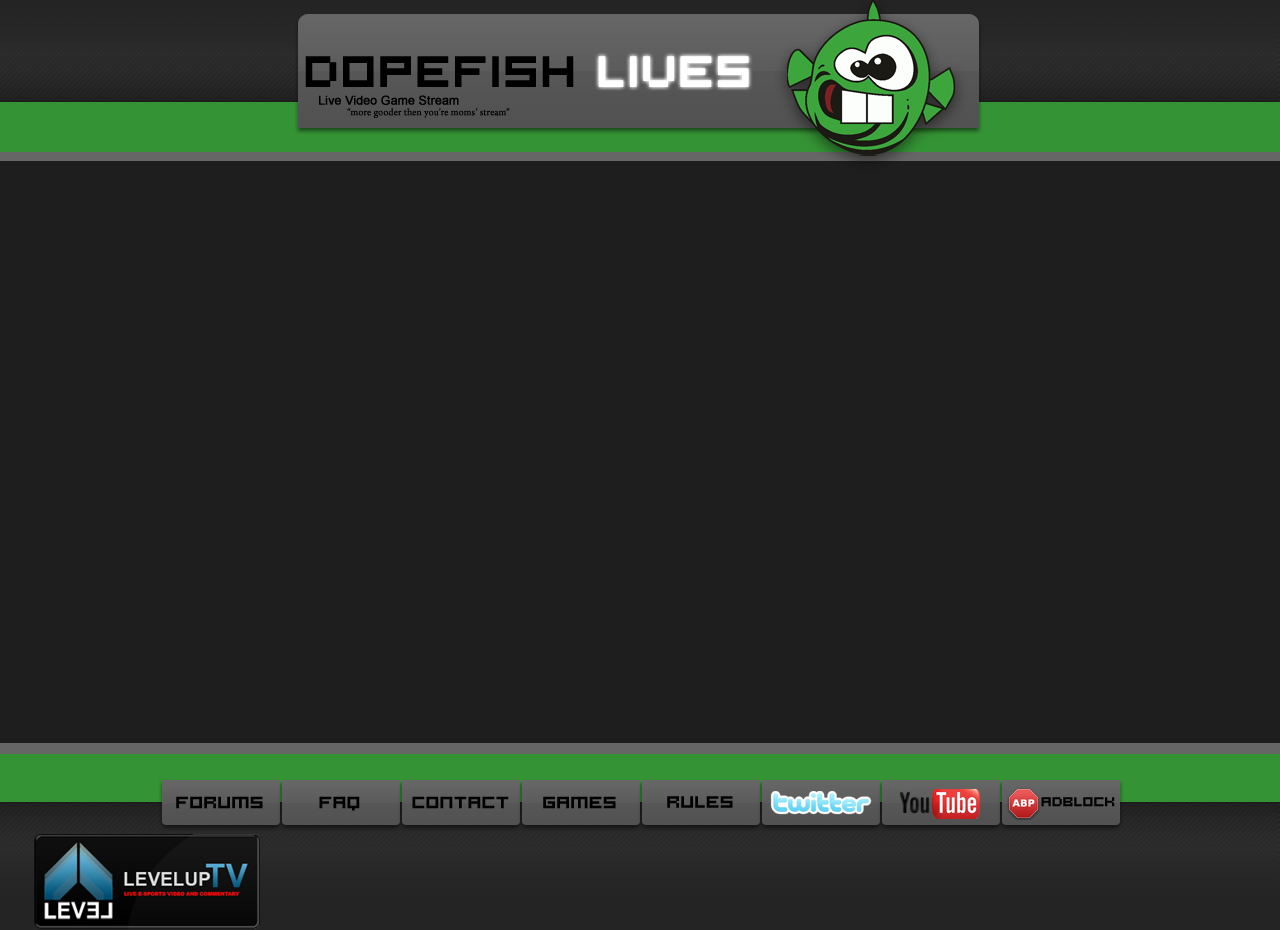
<style>
.page{position:relative;width:1280px;height:930px;background:#1e1e1e}
.page>*{position:absolute;margin:0}
.t1{font:48px "mini";color:#000000;font-weight:bold}
.t2{font:48px "mini";color:#ffffff;font-weight:bold}
.t3{font:12px "ArialMT";color:#000000;font-weight:bold}
.t4{font:10px "ArnoPro-Regular";color:#000000;font-weight:bold}
.t5{font:18px "mini";color:#000000;font-weight:bold}
.t6{font:14px "mini";color:#000000;font-weight:bold}
</style>
<div class="page">
<p class="t1" style="left:305px;top:56px;width:269px;height:31px">Dopefish</p>
<p class="t2" style="left:598px;top:56px;width:151px;height:31px">lives</p>
<p class="t3" style="left:319px;top:95px;width:140px;height:10px">Live Video Game Stream</p>
<p class="t4" style="left:347px;top:108px;width:163px;height:10px">“more gooder then you’re moms’ stream”</p>
<p class="t5" style="left:176px;top:796px;width:87px;height:13px">Forums</p>
<p class="t5" style="left:319px;top:796px;width:41px;height:15px">FAQ</p>
<p class="t5" style="left:412px;top:796px;width:97px;height:13px">Contact</p>
<p class="t5" style="left:543px;top:796px;width:73px;height:13px">Games</p>
<p class="t5" style="left:667px;top:796px;width:66px;height:12px">Rules</p>
<p class="t6" style="left:1041px;top:797px;width:74px;height:10px">ADblock</p>
</div>
